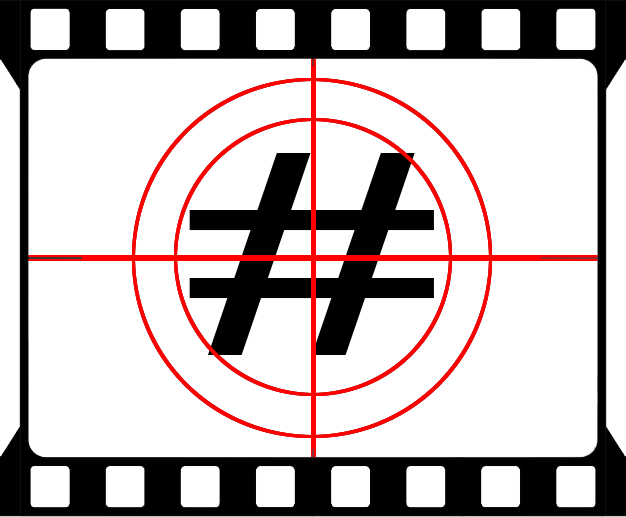
<style>
.page{position:relative;width:626px;height:517px;background:#ffffff}
.page>*{position:absolute;margin:0}
.t1{font:274.2px "ArialMT";color:#000000;scale:1.67 1}
</style>
<div class="page">
<p class="t1" style="left:189px;top:153px;width:245px;height:202px">#</p>
</div>
